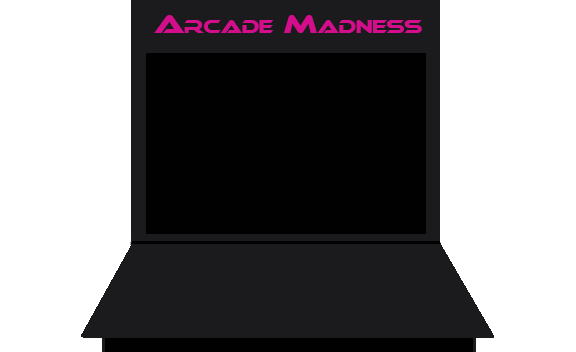
<style>
.page{position:relative;width:576px;height:352px;background:#ffffff}
.page>*{position:absolute;margin:0}
.t1{font:25px "Ethnocentric";color:#d40d8c;font-variant:small-caps}
</style>
<div class="page">
<p class="t1" style="left:154px;top:15px;width:268px;height:18px">Arcade Madness</p>
</div>
